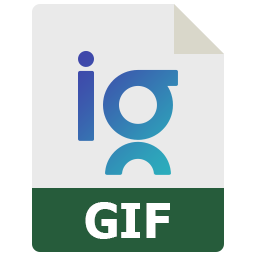
<style>
.page{position:relative;width:256px;height:256px;background:#eaeaea}
.page>*{position:absolute;margin:0}
.t1{font:48px "Tahoma-Bold";color:#ffffff}
</style>
<div class="page">
<p class="t1" style="left:85px;top:202px;width:85px;height:37px">GIF</p>
</div>
